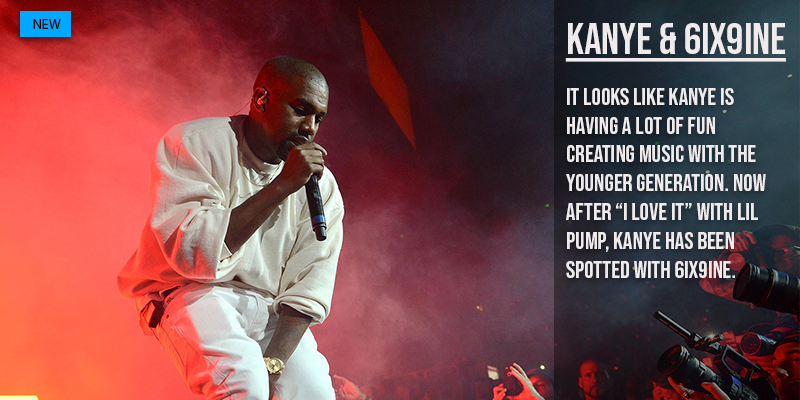
<style>
.page{position:relative;width:800px;height:400px}
.page>*{position:absolute;margin:0}
.t1{font:14px "MyriadPro-Regular";color:#000000}
.t2{font:43px "BebasNeue-Regular";color:#efebec;text-decoration:underline}
.t3{font:24px "BebasNeue-Regular";color:#efebec}
</style>
<div class="page">
<p class="t1" style="left:33px;top:19px;width:28px;height:10px">NEW</p>
<p class="t2" style="left:565px;top:23px;width:221px;height:39px">Kanye &amp; 6ix9ine</p>
<p class="t3" style="left:566px;top:88px;width:200px;height:190px">It looks like Kanye is having a lot of fun creating music with the younger generation. Now after “I love it” with Lil pUmp, Kanye has been spotted with 6ix9ine.</p>
</div>
